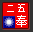
<style>
.page{position:relative;width:33px;height:32px;background:#f20000}
.page>*{position:absolute;margin:0}
.t1{font:10.4px "SimSun";color:#ffffff}
.t2{font:11.7px "SimSun";color:#ffffff}
</style>
<div class="page">
<p class="t1" style="left:7px;top:4px;width:18px;height:8px">二五</p>
<p class="t2" style="left:16px;top:15px;width:11px;height:12px">奉</p>
</div>
